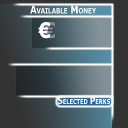
<style>
.page{position:relative;width:128px;height:128px}
.page>*{position:absolute;margin:0}
.t1{font:10.8px "Tahoma-Bold";color:#ffffff;font-variant:small-caps;scale:0.83 1}
.t2{font:21.6px "Tahoma-Bold";color:#ffffff;font-variant:small-caps;scale:0.83 1}
.t3{font:9.6px "Tahoma-Bold";color:#ffffff;font-variant:small-caps;scale:0.83 1}
</style>
<div class="page">
<p class="t1" style="left:30px;top:5px;width:66px;height:9px">Available Money</p>
<p class="t2" style="left:38px;top:22px;width:12px;height:17px">€</p>
<p class="t3" style="left:58px;top:96px;width:52px;height:8px">Selected Perks</p>
</div>
